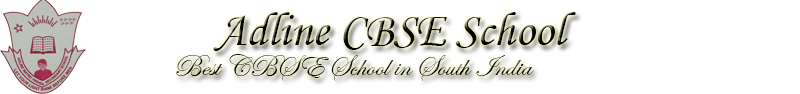
<style>
.page{position:relative;width:800px;height:94px;background:#ffffff}
.page>*{position:absolute;margin:0}
.t1{font:48px "MonotypeCorsiva"}
.t2{font:30px "EdwardianScriptITC"}
</style>
<div class="page">
<p class="t1" style="left:213px;top:12px;width:363px;height:39px">Adline CBSE School</p>
<p class="t2" style="left:176px;top:54px;width:358px;height:27px">Best CBSE School in South India</p>
</div>
